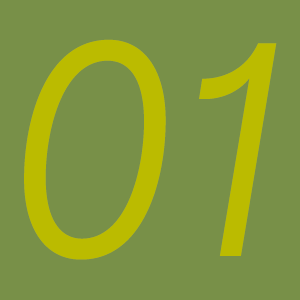
<style>
.page{position:relative;width:300px;height:300px;background:#789048}
.page>*{position:absolute;margin:0}
.t1{font:300px "Protofo-Italic";letter-spacing:0.01em;color:#bbbb00;scale:0.95 1}
</style>
<div class="page">
<p class="t1" style="left:24px;top:39px;width:253px;height:221px">01</p>
</div>
